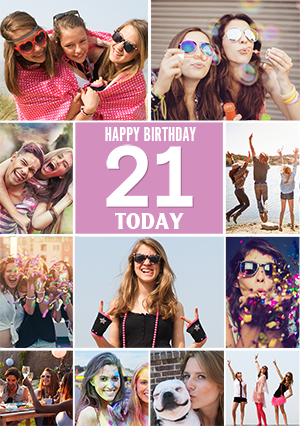
<style>
.page{position:relative;width:300px;height:426px}
.page>*{position:absolute;margin:0}
.t1{font:21px "AlternateGothicCom-No1";color:#ffffff}
.t2{font:85.6px "ChelseaBasis-Bold";color:#ffffff}
.t3{font:23.4px "ClearfaceGothicLHBold";color:#ffffff}
</style>
<div class="page">
<p class="t1" style="left:105px;top:127px;width:91px;height:14px">HAPPY BIRTHDAY</p>
<p class="t2" style="left:106px;top:144px;width:87px;height:63px">21</p>
<p class="t3" style="left:114px;top:213px;width:70px;height:16px">TODAY</p>
</div>
